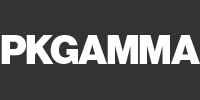
<style>
.page{position:relative;width:200px;height:100px;background:#333333}
.page>*{position:absolute;margin:0}
.t1{font:39.2px "NHaasGroteskDSPro-95Blk";letter-spacing:-0.025em;color:#ffffff}
</style>
<div class="page">
<p class="t1" style="left:1px;top:35px;width:199px;height:29px">PKGAMMA</p>
</div>
